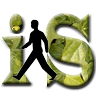
<style>
.page{position:relative;width:96px;height:96px;background:#ffffff}
.page>*{position:absolute;margin:0}
.t1{font:100.9px "LatinWide";scale:0.44 1}
</style>
<div class="page">
<p class="t1" style="left:2px;top:13px;width:92px;height:75px">i S</p>
</div>
